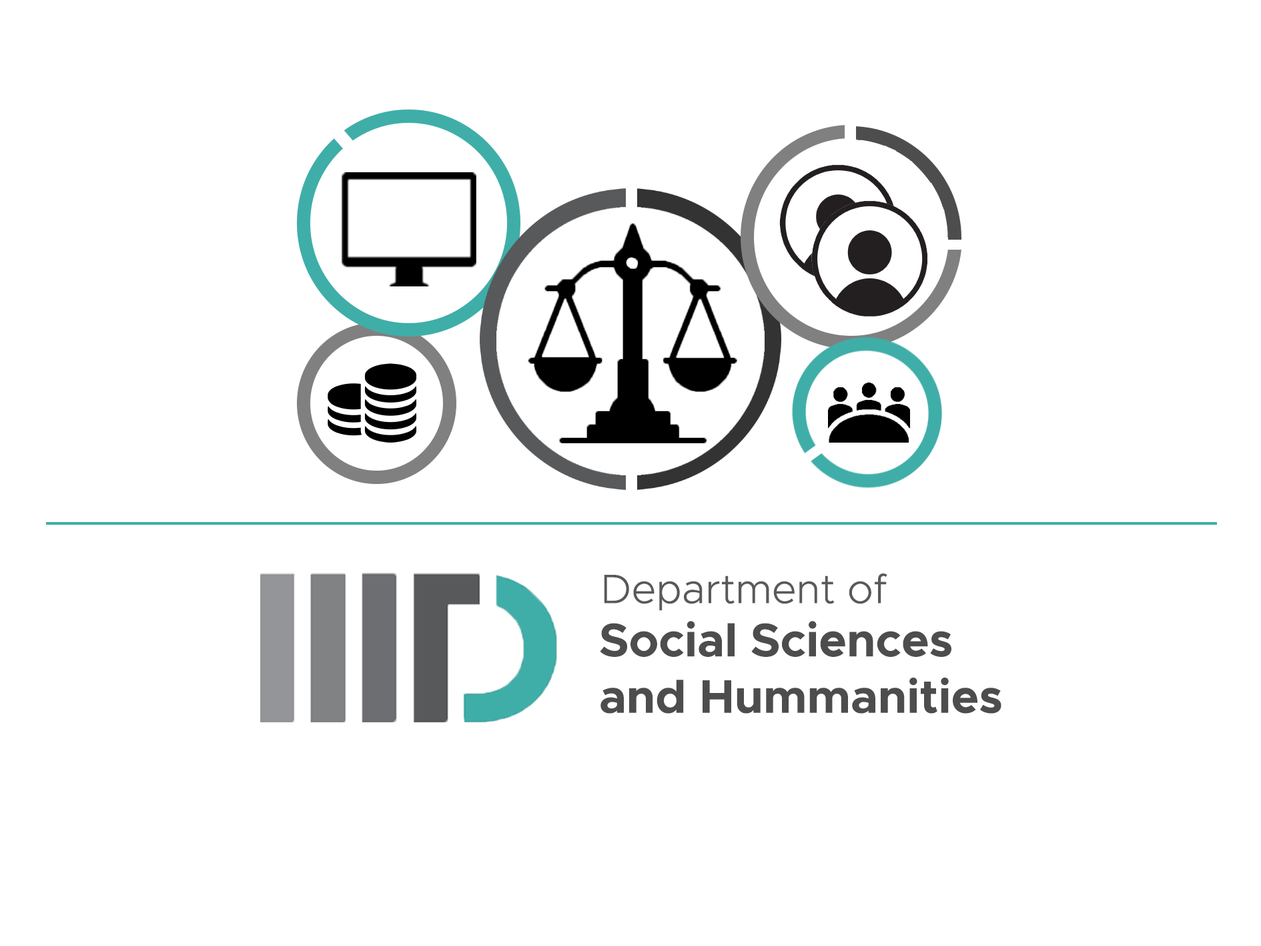
<style>
.page{position:relative;width:1261px;height:946px;background:#ffffff}
.page>*{position:absolute;margin:0}
.t1{font:41.1px "Metropolis-Light";color:#666666}
.t2{font:47px "Metropolis-Bold";color:#4d4d4d}
</style>
<div class="page">
<p class="t1" style="left:604px;top:573px;width:283px;height:38px">Department of</p>
<p class="t2" style="left:600px;top:621px;width:402px;height:92px">Social Sciences<br>and Hummanities</p>
</div>
